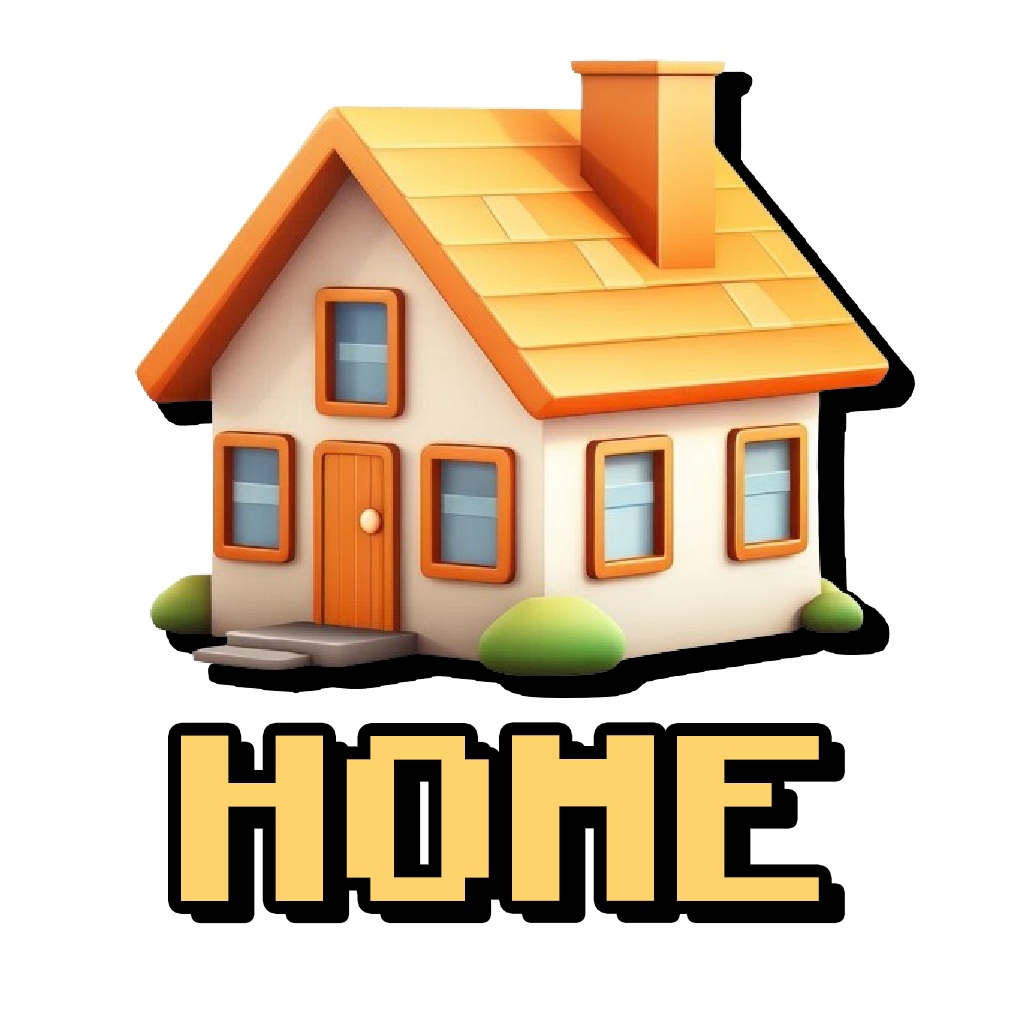
<style>
.page{position:relative;width:1024px;height:1024px;background:#ffffff}
.page>*{position:absolute;margin:0}
.t1{font:236.1px "Minecraft-Bold";color:#ffd36c}
</style>
<div class="page">
<p class="t1" style="left:181px;top:735px;width:638px;height:166px">HOME</p>
</div>
